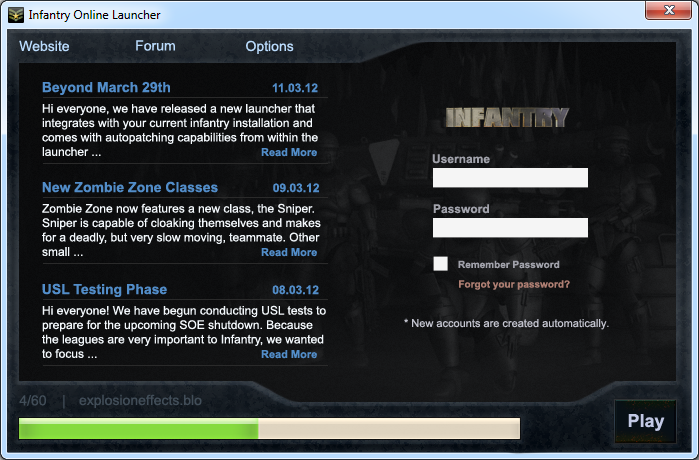
<style>
.page{position:relative;width:699px;height:460px}
.page>*{position:absolute;margin:0}
.t1{font:14px "ArialMT";color:#bbdcfd}
.t2{font:14px "Arial-BoldMT";color:#528dc9}
.t3{font:12px "Arial-BoldMT";color:#528dc9}
.t4{font:12px "ArialMT";color:#f4f9fd}
.t5{font:11px "Arial-BoldMT";color:#528dc9}
.t6{font:12px "Arial-BoldMT";color:#a1a2ab}
.t7{font:10px "Arial-BoldMT";color:#a1a2ab}
.t8{font:10px "Arial-BoldMT";color:#af7f73}
.t9{font:11px "ArialMT";color:#c3c4cf}
.t10{font:14px "ArialMT";color:#414d58}
.t11{font:18px "Arial-BoldMT";color:#c2c9e5}
</style>
<div class="page">
<p class="t1" style="left:19px;top:40px;width:50px;height:12px">Website</p>
<p class="t1" style="left:136px;top:40px;width:39px;height:11px">Forum</p>
<p class="t1" style="left:246px;top:40px;width:48px;height:14px">Options</p>
<p class="t2" style="left:42px;top:81px;width:276px;height:14px">Beyond March 29th                          <span class="t3">11.03.12</span></p>
<p class="t4" style="left:42px;top:104px;width:276px;height:52px">Hi everyone, we have released a new launcher that integrates with your current infantry installation and comes with autopatching capabilities from within the launcher ...</p>
<p class="t5" style="left:261px;top:148px;width:56px;height:9px">Read More</p>
<p class="t6" style="left:432px;top:154px;width:58px;height:10px">Username</p>
<p class="t2" style="left:42px;top:181px;width:277px;height:12px">New Zombie Zone Classes              <span class="t3">09.03.12</span></p>
<p class="t4" style="left:42px;top:203px;width:279px;height:53px">Zombie Zone now features a new class, the Sniper. Sniper is capable of cloaking themselves and makes for a deadly, but very slow moving, teammate. Other small ...</p>
<p class="t6" style="left:433px;top:204px;width:56px;height:10px">Password</p>
<p class="t5" style="left:261px;top:248px;width:56px;height:9px">Read More</p>
<p class="t7" style="left:458px;top:260px;width:102px;height:9px">Remember Password</p>
<p class="t8" style="left:459px;top:280px;width:111px;height:10px">Forgot your password?</p>
<p class="t2" style="left:42px;top:283px;width:277px;height:14px">USL Testing Phase                           <span class="t3">08.03.12</span></p>
<p class="t4" style="left:42px;top:305px;width:284px;height:53px">Hi everyone! We have begun conducting USL tests to prepare for the upcoming SOE shutdown. Because <br>the leagues are very important to Infantry, we wanted<br>to focus ...</p>
<p class="t9" style="left:404px;top:318px;width:205px;height:12px">* New accounts are created automatically.</p>
<p class="t5" style="left:261px;top:350px;width:56px;height:9px">Read More</p>
<p class="t10" style="left:19px;top:395px;width:46px;height:14px">4/60    |</p>
<p class="t10" style="left:79px;top:394px;width:123px;height:14px">explosioneffects.blo</p>
<p class="t11" style="left:628px;top:414px;width:37px;height:17px">Play</p>
</div>
